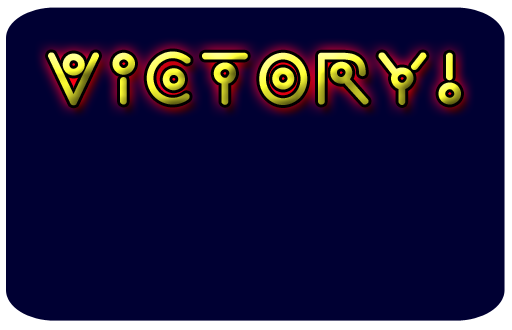
<style>
.page{position:relative;width:512px;height:330px;background:#000033}
.page>*{position:absolute;margin:0}
.t1{font:75px "wearealien!!"}
</style>
<div class="page">
<p class="t1" style="left:48px;top:51px;width:413px;height:55px">Victory!</p>
</div>
